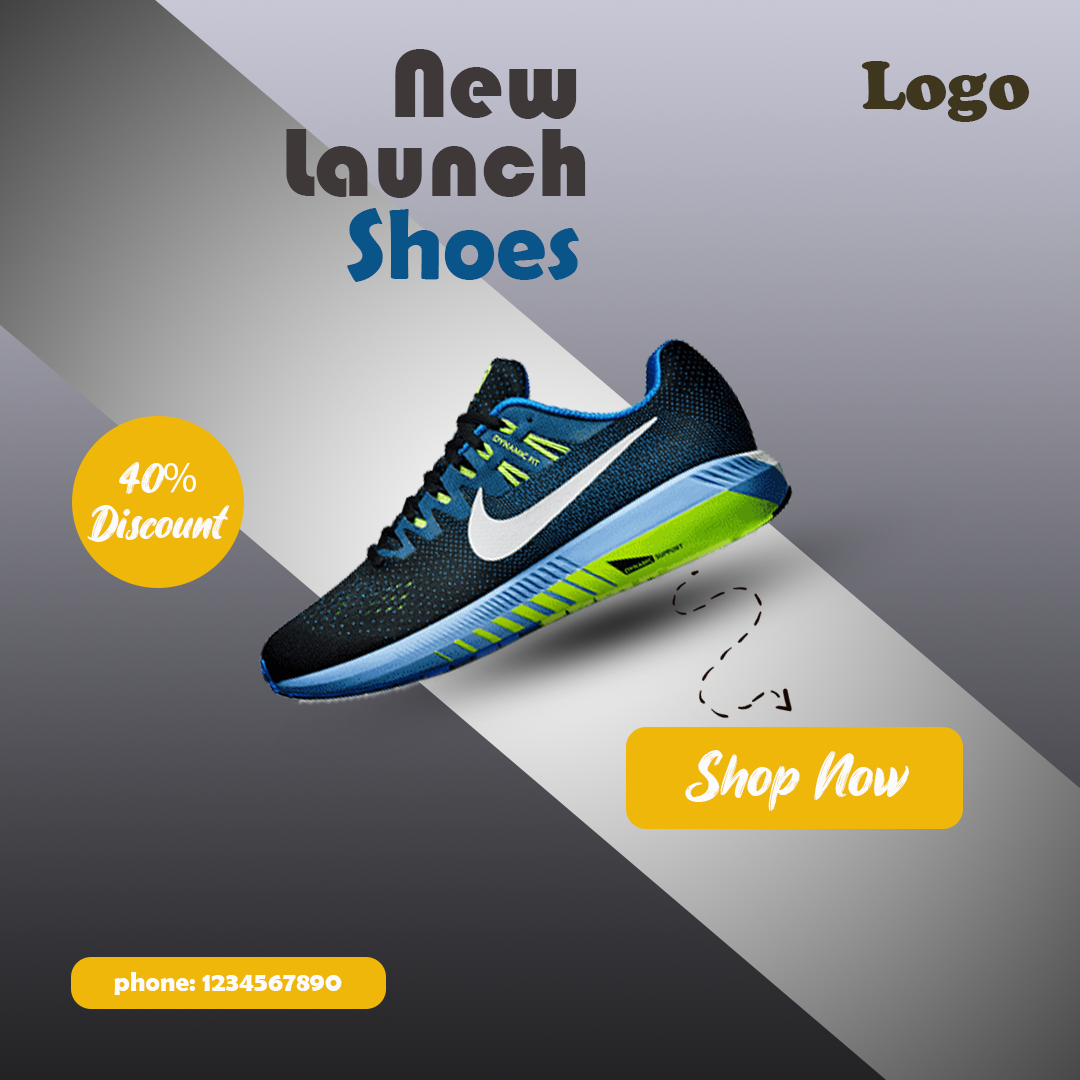
<style>
.page{position:relative;width:1080px;height:1080px}
.page>*{position:absolute;margin:0}
.t1{font:100px "Bauhaus93";color:#3e3838}
.t2{font:70px "CooperBlack";color:#3e361d}
.t3{font:100px "BerlinSansFBDemi-Bold";color:#095589}
.t4{font:43.6px "JamesStroker";color:#fbfbfb}
.t5{font:43.6px "MyriadPro-Regular";color:#fbfbfb}
.t6{font:60px "JamesStroker";color:#fbfbfb}
.t7{font:27.4px "BerlinSansFBDemi-Bold";color:#fbfbfb}
</style>
<div class="page">
<p class="t1" style="left:395px;top:49px;width:182px;height:70px">New</p>
<p class="t2" style="left:861px;top:61px;width:168px;height:61px">Logo</p>
<p class="t1" style="left:286px;top:129px;width:300px;height:69px">Launch</p>
<p class="t3" style="left:347px;top:208px;width:232px;height:74px">Shoes</p>
<p class="t4" style="left:119px;top:462px;width:77px;height:32px">40<span class="t5">%</span></p>
<p class="t4" style="left:87px;top:505px;width:143px;height:37px">Discount</p>
<p class="t6" style="left:685px;top:750px;width:224px;height:61px">Shop Now</p>
<p class="t7" style="left:114px;top:972px;width:228px;height:23px">phone: 1234567890</p>
</div>
